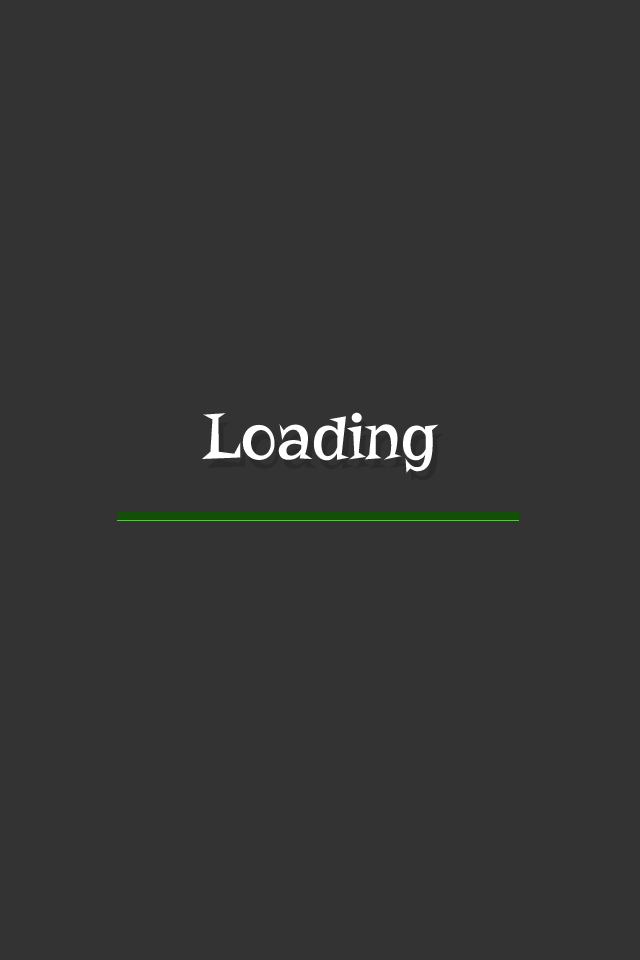
<style>
.page{position:relative;width:640px;height:960px;background:#333333}
.page>*{position:absolute;margin:0}
.t1{font:68.3px "Risque-Regular";color:#ffffff}
</style>
<div class="page">
<p class="t1" style="left:202px;top:412px;width:237px;height:61px">Loading</p>
</div>
